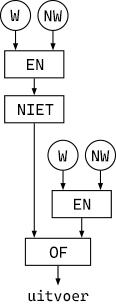
<style>
.page{position:relative;width:116px;height:308px;background:#ffffff}
.page>*{position:absolute;margin:0}
.t1{font:15.9px "CascadiaCode";color:#000000}
.t2{font:14.9px "CascadiaCode";color:#000000}
</style>
<div class="page">
<p class="t1" style="left:10px;top:9px;width:10px;height:12px">W</p>
<p class="t1" style="left:44px;top:10px;width:18px;height:12px">NW</p>
<p class="t1" style="left:27px;top:59px;width:17px;height:11px">EN</p>
<p class="t1" style="left:18px;top:104px;width:36px;height:11px">NIET</p>
<p class="t1" style="left:58px;top:150px;width:10px;height:12px">W</p>
<p class="t1" style="left:92px;top:150px;width:18px;height:12px">NW</p>
<p class="t1" style="left:74px;top:198px;width:17px;height:12px">EN</p>
<p class="t1" style="left:49px;top:246px;width:19px;height:12px">OF</p>
<p class="t2" style="left:28px;top:289px;width:61px;height:13px">uitvoer</p>
</div>
